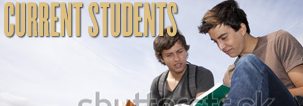
<style>
.page{position:relative;width:303px;height:106px}
.page>*{position:absolute;margin:0}
.t1{font:42px "Champion-HTF-Bantamweight";letter-spacing:0.01em;color:#debf7d}
</style>
<div class="page">
<p class="t1" style="left:4px;top:2px;width:173px;height:35px">CURRENT STUDENTS</p>
</div>
